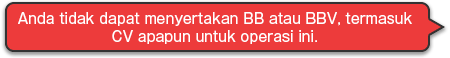
<style>
.page{position:relative;width:450px;height:58px;background:#ed3b3b}
.page>*{position:absolute;margin:0}
.t1{font:14px/18px "GothicMB101Pro-Regular";color:#ffffff}
</style>
<div class="page">
<p class="t1" style="left:18px;top:12px;width:394px;height:32px;text-align:center">Anda tidak dapat menyertakan BB atau BBV, termasuk<br>CV apapun untuk operasi ini.</p>
</div>
